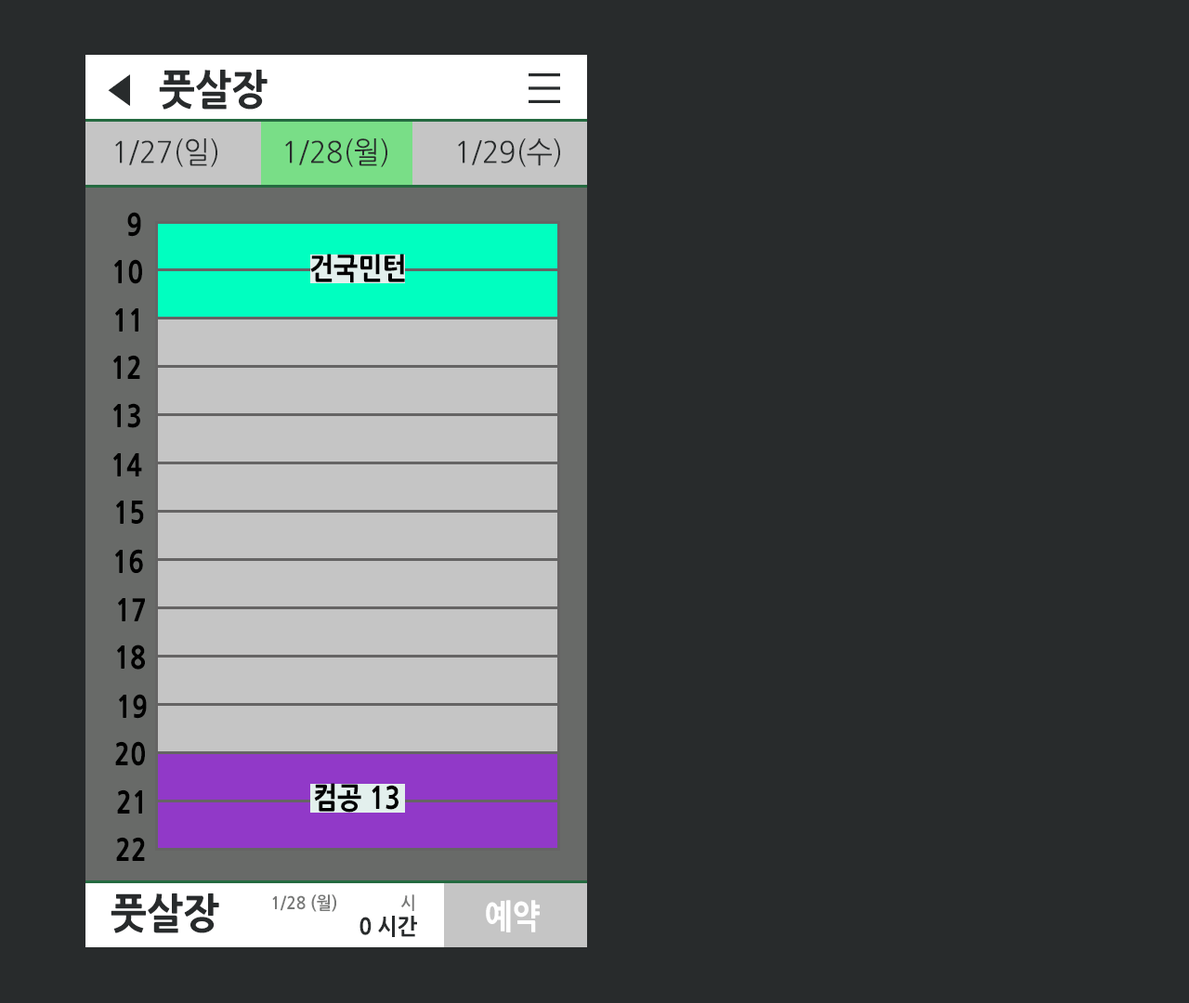
<style>
.page{position:relative;width:1189px;height:1003px;background:#282b2c}
.page>*{position:absolute;margin:0}
.t1{font:40.9px "AdobeGothicStd-Bold";color:#282b2c;scale:0.87 1}
.t2{font:40.9px "NanumGothicExtraBold";color:#282b2c;scale:0.94 1}
.t3{font:29.7px "NanumGothic";color:#282b2c;scale:0.94 1}
.t4{font:29.7px "NanumGothicExtraBold";color:#000000;scale:0.87 1}
.t5{font:17.1px "NanumGothicBold";color:#787978;scale:0.94 1}
.t6{font:33.4px "NanumGothicExtraBold";color:#ffffff;scale:0.87 1}
.t7{font:22.3px "NanumGothicExtraBold";color:#282b2c;scale:0.94 1}
</style>
<div class="page">
<p class="t1" style="left:108px;top:74px;width:22px;height:33px">◀</p>
<p class="t2" style="left:159px;top:70px;width:108px;height:40px">풋살장</p>
<p class="t3" style="left:115px;top:138px;width:102px;height:29px">1/27(일)</p>
<p class="t3" style="left:285px;top:138px;width:102px;height:29px">1/28(월)</p>
<p class="t3" style="left:458px;top:138px;width:102px;height:29px">1/29(수)</p>
<p class="t4" style="left:127px;top:212px;width:14px;height:25px">9</p>
<p class="t4" style="left:310px;top:254px;width:95px;height:29px">건국민턴</p>
<p class="t4" style="left:114px;top:259px;width:28px;height:25px">10</p>
<p class="t4" style="left:115px;top:308px;width:23px;height:24px">11</p>
<p class="t4" style="left:113px;top:355px;width:27px;height:24px">12</p>
<p class="t4" style="left:113px;top:403px;width:27px;height:25px">13</p>
<p class="t4" style="left:113px;top:453px;width:29px;height:23px">14</p>
<p class="t4" style="left:116px;top:501px;width:28px;height:23px">15</p>
<p class="t4" style="left:115px;top:549px;width:28px;height:24px">16</p>
<p class="t4" style="left:118px;top:598px;width:27px;height:23px">17</p>
<p class="t4" style="left:117px;top:645px;width:28px;height:25px">18</p>
<p class="t4" style="left:119px;top:694px;width:28px;height:25px">19</p>
<p class="t4" style="left:115px;top:741px;width:30px;height:25px">20</p>
<p class="t4" style="left:314px;top:783px;width:84px;height:30px">컴공 13</p>
<p class="t4" style="left:117px;top:789px;width:25px;height:25px">21</p>
<p class="t4" style="left:116px;top:837px;width:29px;height:24px">22</p>
<p class="t2" style="left:111px;top:893px;width:108px;height:40px">풋살장</p>
<p class="t5" style="left:272px;top:894px;width:142px;height:18px">1/28 (월)              시</p>
<p class="t6" style="left:486px;top:900px;width:54px;height:32px">예약</p>
<p class="t7" style="left:359px;top:916px;width:58px;height:21px">0 시간</p>
</div>
